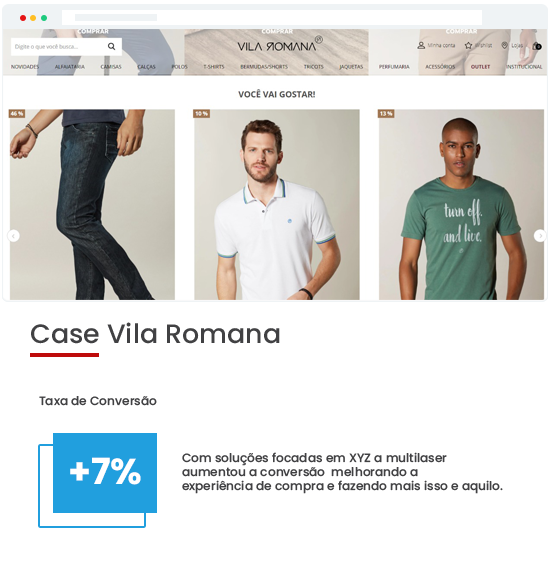
<style>
.page{position:relative;width:552px;height:572px;background:#ffffff}
.page>*{position:absolute;margin:0}
.t1{font:26.6px "Poppins-Medium";color:#414143}
.t2{font:12px "Poppins-Medium";color:#414143}
.t3{font:36px "Poppins-Bold";color:#ffffff}
</style>
<div class="page">
<p class="t1" style="left:31px;top:322px;width:249px;height:22px">Case Vila Romana</p>
<p class="t2" style="left:39px;top:396px;width:118px;height:10px">Taxa de Conversão</p>
<p class="t3" style="left:70px;top:457px;width:71px;height:28px">+7%</p>
<p class="t2" style="left:182px;top:452px;width:321px;height:42px">Com soluções focadas em XYZ a multilaser <br>aumentou a conversão  melhorando a <br>experiência de compra e fazendo mais isso e aquilo.</p>
</div>
